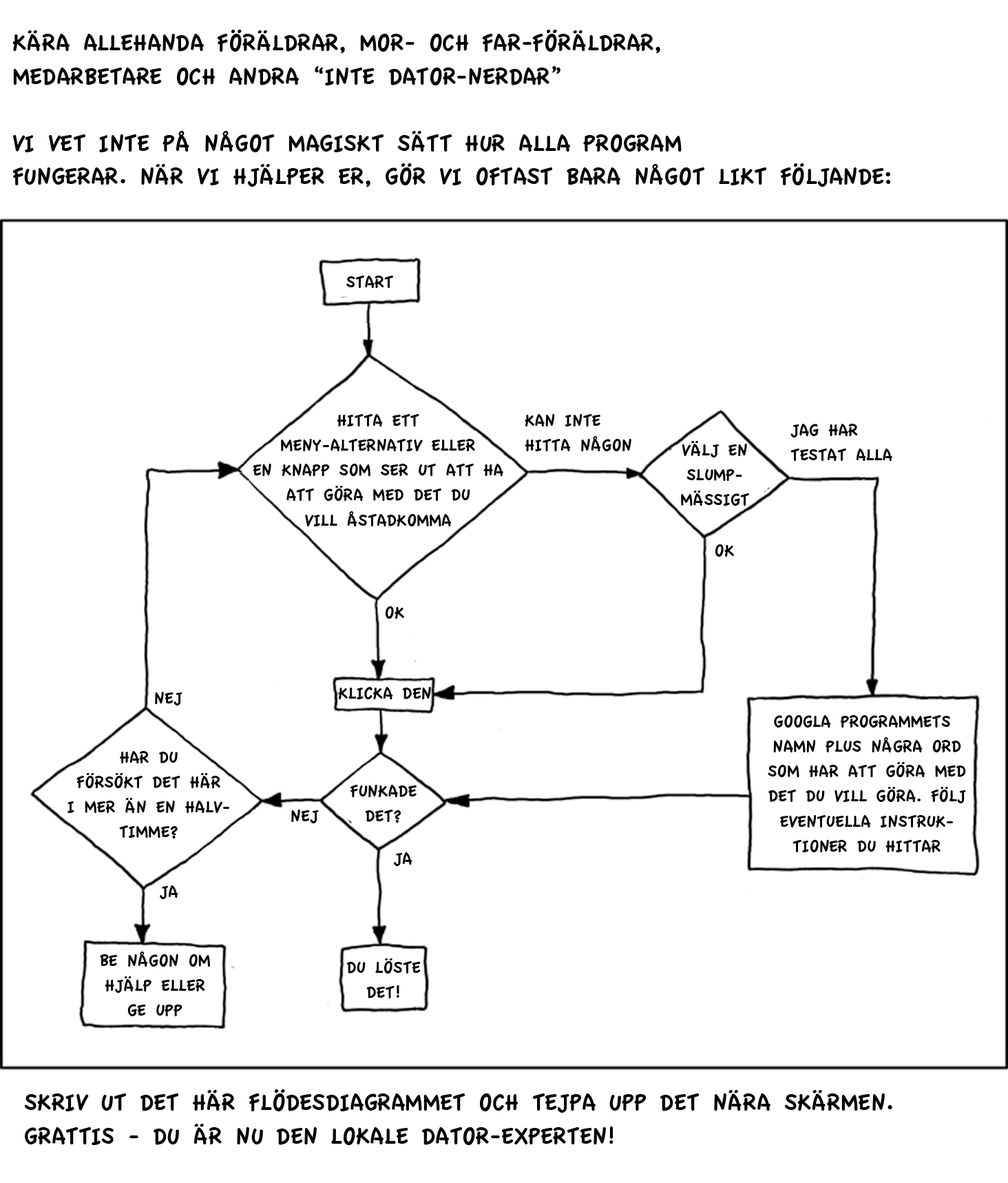
<style>
.page{position:relative;width:1008px;height:1183px;background:#ffffff}
.page>*{position:absolute;margin:0}
.t1{font:24.9px "AppleCasual";color:#000000;text-transform:uppercase}
.t2{font:17.8px "AppleCasual";color:#000000;text-transform:uppercase}
</style>
<div class="page">
<p class="t1" style="left:12px;top:30px;width:879px;height:157px">Kära allehanda föräldrar, mor- och far-föräldrar, <br>medarbetare och andra “inte dator-nerdar”<br><br>Vi vet inte på något magiskt sätt hur alla program<br>fungerar. När vi hjälper er, gör vi oftast bara något likt följande:</p>
<p class="t2" style="left:346px;top:275px;width:47px;height:13px">Start</p>
<p class="t2" style="left:253px;top:414px;width:250px;height:112px;text-align:center">Hitta ett<br>meny-alternativ eller<br>en knapp som ser ut att ha<br>att göra med det du<br>vill åstadkomma</p>
<p class="t2" style="left:525px;top:414px;width:107px;height:37px">Kan inte<br>hitta någon</p>
<p class="t2" style="left:791px;top:424px;width:102px;height:37px">Jag har<br>testat alla</p>
<p class="t2" style="left:681px;top:441px;width:68px;height:65px;text-align:center">Välj en<br>slump-<br>mässigt</p>
<p class="t2" style="left:715px;top:544px;width:19px;height:13px">Ok</p>
<p class="t2" style="left:385px;top:606px;width:19px;height:12px">Ok</p>
<p class="t2" style="left:338px;top:687px;width:93px;height:12px">Klicka den</p>
<p class="t2" style="left:155px;top:692px;width:28px;height:13px">Nej</p>
<p class="t2" style="left:768px;top:715px;width:198px;height:137px;text-align:center">Googla programmets <br>namn plus några ord<br>som har att göra med<br>det du vill göra. Följ<br>eventuella instruk-<br>tioner du hittar</p>
<p class="t2" style="left:67px;top:751px;width:162px;height:87px;text-align:center">Har du<br>försökt det här<br>i mer än en halv-<br>timme?</p>
<p class="t2" style="left:351px;top:784px;width:66px;height:38px;text-align:center">Funkade<br>det?</p>
<p class="t2" style="left:291px;top:809px;width:28px;height:14px">Nej</p>
<p class="t2" style="left:394px;top:852px;width:19px;height:14px">Ja</p>
<p class="t2" style="left:160px;top:885px;width:18px;height:14px">Ja</p>
<p class="t2" style="left:100px;top:951px;width:110px;height:65px;text-align:center">Be någon om<br>hjälp eller<br>ge upp</p>
<p class="t2" style="left:346px;top:958px;width:75px;height:40px;text-align:center">Du löste<br>det!</p>
<p class="t1" style="left:24px;top:1089px;width:869px;height:56px">Skriv ut det här flödesdiagrammet och tejpa upp det nära skärmen.<br>Grattis - du är nu den lokale dator-experten!</p>
</div>
